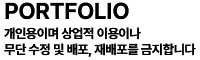
<style>
.page{position:relative;width:200px;height:60px;background:#ffffff}
.page>*{position:absolute;margin:0}
.t1{font:13px/16px "Pretendard-Bold";letter-spacing:-0.025em;color:#000000;text-transform:uppercase}
.t2{font:23px/29px "Pretendard-Bold";letter-spacing:-0.025em;color:#000000;text-transform:uppercase}
</style>
<div class="page">
<p class="t1" style="left:4px;top:2px;width:192px;height:55px"><span class="t2">PORTFOLIO<br></span>개인용이며 상업적 이용이나 <br>무단 수정 및 배포, 재배포를 금지합니다</p>
</div>
